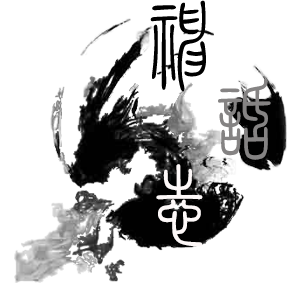
<style>
.page{position:relative;width:300px;height:300px;background:#ffffff}
.page>*{position:absolute;margin:0}
.t1{font:96.9px "HYj1gf";color:#000000}
.t2{font:87.7px "HYj1gf";color:#fdf8f8}
</style>
<div class="page">
<p class="t1" style="left:150px;top:0px;width:56px;height:92px">神</p>
<p class="t2" style="left:156px;top:164px;width:47px;height:83px">志</p>
</div>
